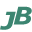
<style>
.page{position:relative;width:32px;height:32px;background:#ffffff}
.page>*{position:absolute;margin:0}
.t1{font:24.4px "Verdana-BoldItalic";letter-spacing:0.025em;color:#3c8571;scale:1.05 1}
</style>
<div class="page">
<p class="t1" style="left:13px;top:6px;width:19px;height:19px">B</p>
<p class="t1" style="left:0px;top:11px;width:16px;height:19px">J</p>
</div>
